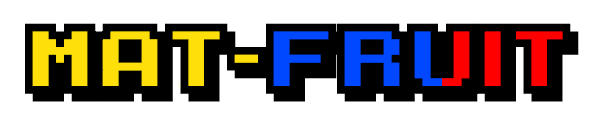
<style>
.page{position:relative;width:600px;height:125px;background:#ffffff}
.page>*{position:absolute;margin:0}
.t1{font:79.8px "KarmaticArcade";color:#000000;text-transform:uppercase}
</style>
<div class="page">
<p class="t1" style="left:25px;top:23px;width:554px;height:79px">MAT-FRUIT</p>
</div>
